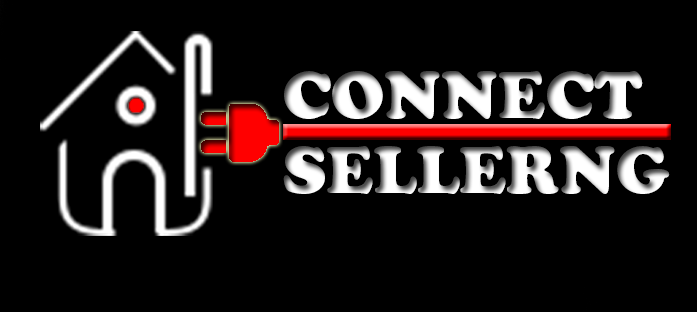
<style>
.page{position:relative;width:697px;height:312px;background:#000000}
.page>*{position:absolute;margin:0}
.t1{font:65px "CooperBlackStd"}
</style>
<div class="page">
<p class="t1" style="left:284px;top:71px;width:359px;height:48px">CONNECT</p>
<p class="t1" style="left:283px;top:146px;width:387px;height:48px">SELLERNG</p>
</div>
